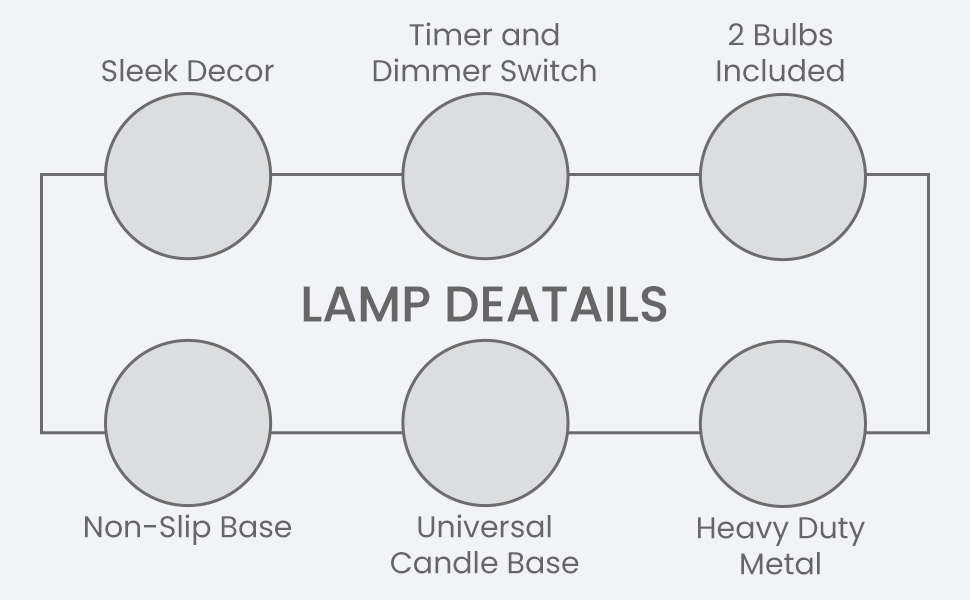
<style>
.page{position:relative;width:970px;height:600px;background:#f2f3f6}
.page>*{position:absolute;margin:0}
.t1{font:30px "Poppins-Regular";color:#666666}
.t2{font:50px "Poppins-Medium";color:#666666}
</style>
<div class="page">
<p class="t1" style="left:373px;top:22px;width:223px;height:60px;text-align:center">Timer and<br>Dimmer Switch</p>
<p class="t1" style="left:717px;top:23px;width:127px;height:59px;text-align:center">2 Bulbs<br>Included</p>
<p class="t1" style="left:102px;top:59px;width:172px;height:23px">Sleek Decor</p>
<p class="t2" style="left:303px;top:286px;width:364px;height:36px">LAMP DEATAILS</p>
<p class="t1" style="left:85px;top:514px;width:206px;height:31px">Non-Slip Base</p>
<p class="t1" style="left:391px;top:514px;width:188px;height:60px;text-align:center">Universal<br>Candle Base</p>
<p class="t1" style="left:698px;top:517px;width:167px;height:58px;text-align:center">Heavy Duty<br>Metal</p>
</div>
